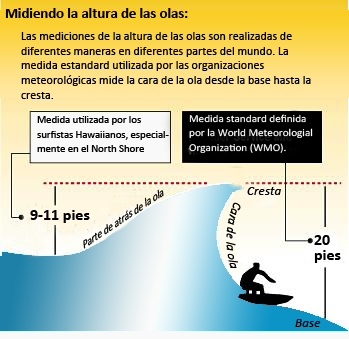
<style>
.page{position:relative;width:349px;height:339px}
.page>*{position:absolute;margin:0}
.t1{font:14.7px "Calibri-Bold";color:#000000}
.t2{font:12px/14.7px "Calibri";color:#000000}
.t3{font:10.7px/14.7px "Calibri";color:#000000}
.t4{font:10.5px/14.4px "Calibri";color:#fefefe;scale:1.07 1}
.t5{font:10.5px/14.4px "Calibri";color:#fbfbfb;scale:1.07 1}
.t6{font:12.3px "Calibri";color:#010100;scale:0.85 1}
.t7{font:13.3px "Calibri-Italic";color:#000000}
.t8{font:13.3px "Calibri-Italic";color:#000000;scale:0.84 1}
.t9{font:16px "Calibri-Bold";color:#000000}
.t10{font:16px/14.7px "Calibri-Bold";color:#000000}
</style>
<div class="page">
<p class="t1" style="left:5px;top:8px;width:183px;height:10px">Midiendo la altura de las olas:</p>
<p class="t2" style="left:21px;top:32px;width:290px;height:67px">Las mediciones de la altura de las olas son realizadas de diferentes maneras en diferentes partes del mundo. La medida estandard utilizada por las organizaciones meteorológicas mide la cara de la ola desde la base hasta la cresta.</p>
<p class="t3" style="left:37px;top:116px;width:132px;height:36px">Medida utilizada por los <br>surfistas Hawaiianos, especial-<br>mente en el North Shore</p>
<p class="t4" style="left:189px;top:114px;width:124px;height:39px">Medida standard definida por la World Meteorologial<span class="t5"> Organization (WMO).</span></p>
<p class="t6" style="left:83px;top:189px;width:81px;height:60px;rotate:-34deg">Parte de atrás de la ola</p>
<p class="t7" style="left:247px;top:187px;width:34px;height:8px">Cresta</p>
<p class="t8" style="left:226px;top:202px;width:15px;height:66px;rotate:93deg">Cara de la ola</p>
<p class="t9" style="left:30px;top:210px;width:60px;height:13px">9-11 pies</p>
<p class="t10" style="left:314px;top:235px;width:27px;height:28px">20<br>pies</p>
<p class="t7" style="left:295px;top:319px;width:26px;height:8px">Base</p>
</div>
